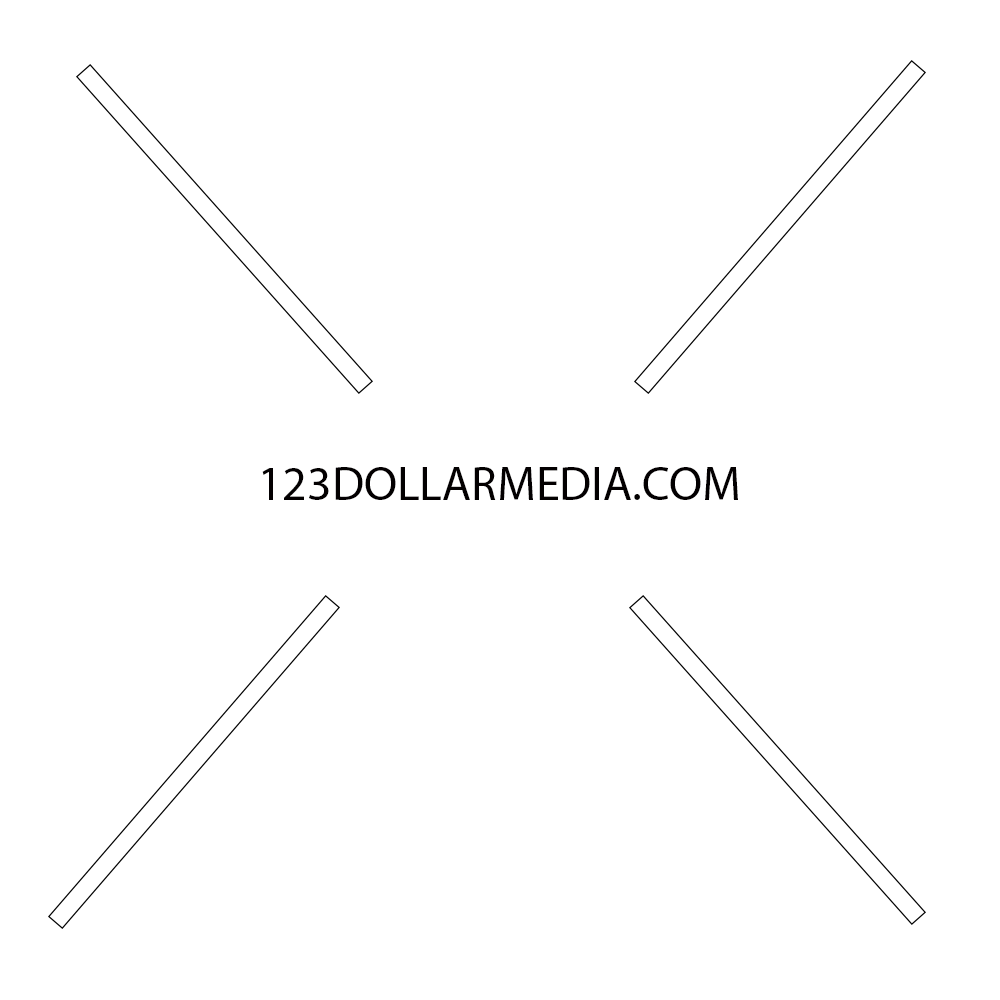
<style>
.page{position:relative;width:1000px;height:1000px;background:#ffffff}
.page>*{position:absolute;margin:0}
.t1{font:48px "MyriadPro-Regular";color:#030001}
</style>
<div class="page">
<p class="t1" style="left:262px;top:467px;width:476px;height:33px">123DOLLARMEDIA.COM</p>
</div>
